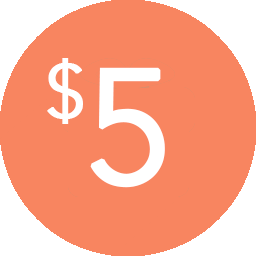
<style>
.page{position:relative;width:256px;height:256px;background:#f88560}
.page>*{position:absolute;margin:0}
.t1{font:128px "Avenir-Light";color:#ffffff;font-weight:bold}
.t2{font:160px "Avenir-Light";color:#ffffff;font-weight:bold}
</style>
<div class="page">
<p class="t1" style="left:47px;top:58px;width:118px;height:130px">$<span class="t2">5</span></p>
</div>
